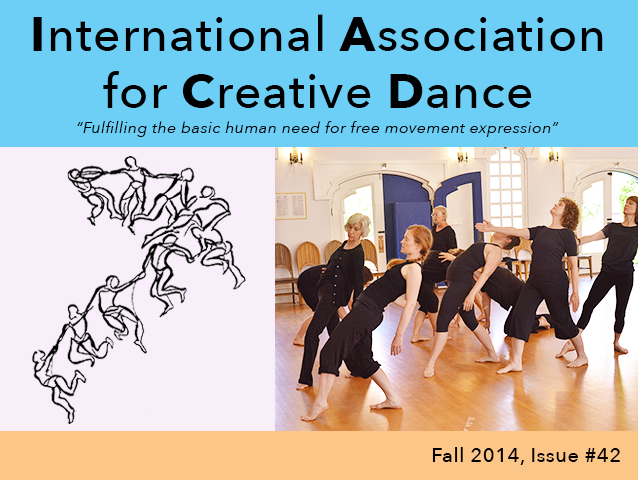
<style>
.page{position:relative;width:638px;height:480px;background:#6dcff6}
.page>*{position:absolute;margin:0}
.t1{font:48px "AvenirNext-Medium";letter-spacing:0.025em;color:#000000}
.t2{font:48px "AvenirNext-Bold";letter-spacing:0.025em;color:#000000}
.t3{font:16px "AvenirNext-Italic";letter-spacing:0.025em;color:#000000}
.t4{font:20px "AvenirNext-Medium";letter-spacing:0.025em;color:#000000}
</style>
<div class="page">
<p class="t1" style="left:33px;top:14px;width:570px;height:94px;text-align:center"><span class="t2">I</span>nternational <span class="t2">A</span>ssociation<br>for <span class="t2">C</span>reative <span class="t2">D</span>ance</p>
<p class="t3" style="left:77px;top:121px;width:482px;height:16px">“Fulfilling the basic human need for free movement expression”</p>
<p class="t4" style="left:432px;top:447px;width:188px;height:18px">Fall 2014, Issue #42</p>
</div>
